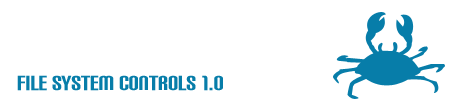
<style>
.page{position:relative;width:453px;height:106px;background:#ffffff}
.page>*{position:absolute;margin:0}
.t1{font:24px "CarbonBlock";color:#077da9}
</style>
<div class="page">
<p class="t1" style="left:17px;top:75px;width:206px;height:16px">File System Controls 1.0</p>
</div>
